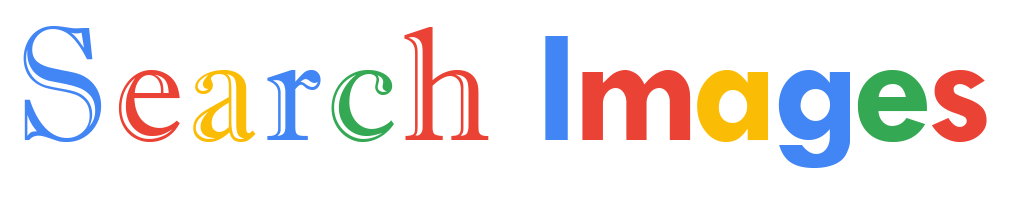
<style>
.page{position:relative;width:1009px;height:200px;background:#ffffff}
.page>*{position:absolute;margin:0}
.t1{font:161.6px "ImprintMT-Shadow";letter-spacing:0.04em;color:#4285f4;scale:0.95 1}
.t2{font:161.6px "ImprintMT-Shadow";letter-spacing:0.04em;color:#ea4335;scale:0.95 1}
.t3{font:161.6px "ImprintMT-Shadow";letter-spacing:0.04em;color:#fbbc05;scale:0.95 1}
.t4{font:161.6px "ImprintMT-Shadow";letter-spacing:0.04em;color:#34a853;scale:0.95 1}
.t5{font:161.6px "TwCenMT-Bold";letter-spacing:-0.04em;color:#4285f4}
.t6{font:161.6px "TwCenMT-Bold";letter-spacing:-0.04em;color:#ea4335}
.t7{font:161.6px "TwCenMT-Bold";letter-spacing:-0.04em;color:#fbbc05}
.t8{font:161.6px "TwCenMT-Bold";letter-spacing:-0.04em;color:#34a853}
</style>
<div class="page">
<p class="t1" style="left:23px;top:26px;width:466px;height:116px">S<span class="t2">e</span><span class="t3">a</span>r<span class="t4">c</span><span class="t2">h</span></p>
<p class="t5" style="left:545px;top:36px;width:442px;height:132px">I<span class="t6">m</span><span class="t7">a</span>g<span class="t8">e</span><span class="t6">s</span></p>
</div>
